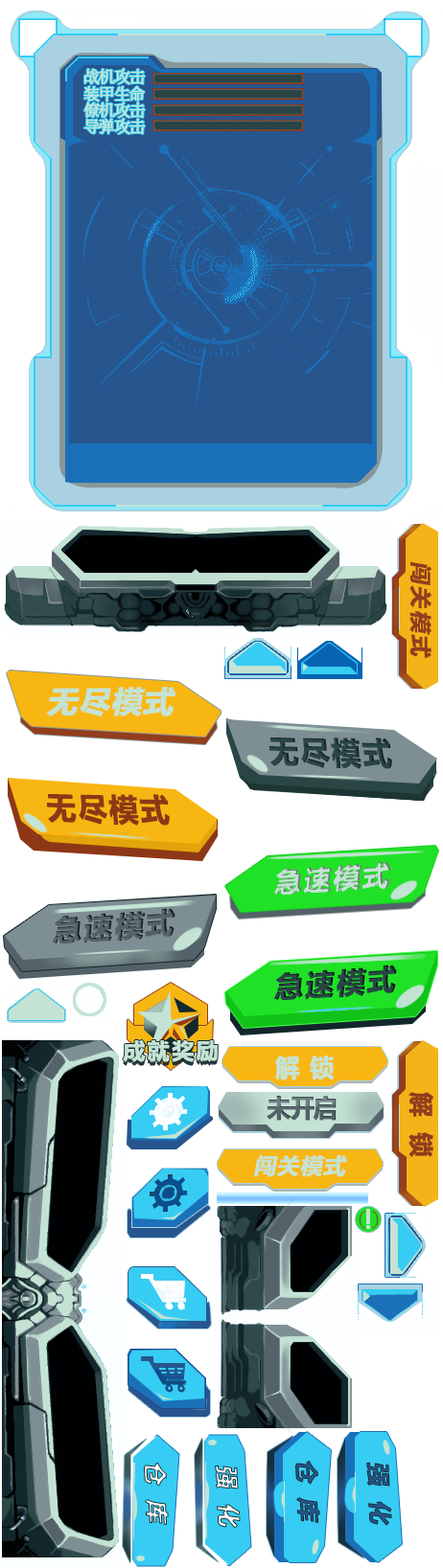
<style>
.page{position:relative;width:443px;height:1568px;background:#ffffff}
.page>*{position:absolute;margin:0}
.t1{font:16px "SourceHanSerifCN-ExtraLight";letter-spacing:-0.08em;color:#c4e3d4;font-weight:bold}
.t2{font:21.7px "MicrosoftYaHei-Bold";letter-spacing:0.1em;color:#923d1d;font-weight:bold;font-style:italic}
.t3{font:29.9px "MicrosoftYaHei-Bold";letter-spacing:0.04em;color:#c4e3d4;text-transform:uppercase;font-weight:bold;font-style:italic}
.t4{font:31.3px "MicrosoftYaHei-Bold";letter-spacing:0.06em;color:#294544;font-weight:bold;scale:0.92 1}
.t5{font:31.3px "MicrosoftYaHei-Bold";letter-spacing:0.06em;color:#8e3716;font-weight:bold;scale:0.92 1}
.t6{font:26.9px "MicrosoftYaHei-Bold";letter-spacing:0.06em;color:#c4e3d4;font-weight:bold;font-style:italic}
.t7{font:28.3px "MicrosoftYaHei-Bold";letter-spacing:0.06em;color:#536268;font-weight:bold;font-style:italic}
.t8{font:28.3px "MicrosoftYaHei-Bold";letter-spacing:0.06em;color:#294544;font-weight:bold;font-style:italic}
.t9{font:22.5px "MicrosoftYaHei-Bold";letter-spacing:0.06em;color:#c4e3d4;font-weight:bold}
.t10{font:24.4px "MicrosoftYaHei-Bold";letter-spacing:0.38em;color:#c4e3d4;font-weight:bold}
.t11{font:24.4px "MicrosoftYaHei-Bold";letter-spacing:-0.08em;color:#546369;font-weight:bold}
.t12{font:24.4px "MicrosoftYaHei-Bold";letter-spacing:0.6em;color:#923d1d;font-weight:bold}
.t13{font:21.7px "MicrosoftYaHei-Bold";letter-spacing:0.04em;color:#c4e3d4;text-transform:uppercase;font-weight:bold;font-style:italic}
.t14{font:23.3px "MicrosoftYaHei-Bold";letter-spacing:0.6em;text-transform:uppercase;font-weight:bold;font-style:italic}
.t15{font:23.5px "MicrosoftYaHei-Bold";letter-spacing:0.6em;text-transform:uppercase;font-weight:bold;font-style:italic}
</style>
<div class="page">
<p class="t1" style="left:84px;top:68px;width:62px;height:16px">战机攻击</p>
<p class="t1" style="left:83px;top:86px;width:62px;height:16px">装甲生命</p>
<p class="t1" style="left:83px;top:102px;width:63px;height:16px">僚机攻击</p>
<p class="t1" style="left:83px;top:118px;width:63px;height:16px">导弹攻击</p>
<p class="t2" style="left:409px;top:561px;width:22px;height:97px;rotate:90deg">闯关模式</p>
<p class="t3" style="left:47px;top:687px;width:129px;height:29px">无尽模式</p>
<p class="t4" style="left:268px;top:738px;width:124px;height:31px;rotate:1deg">无尽模式</p>
<p class="t5" style="left:46px;top:794px;width:124px;height:32px;rotate:1deg">无尽模式</p>
<p class="t6" style="left:274px;top:862px;width:117px;height:33px;rotate:-4deg">急速模式</p>
<p class="t7" style="left:52px;top:908px;width:123px;height:35px;rotate:-4deg">急速模式</p>
<p class="t8" style="left:273px;top:965px;width:124px;height:35px;rotate:-4deg">急速模式</p>
<p class="t9" style="left:123px;top:1040px;width:94px;height:22px">成就奖励</p>
<p class="t10" style="left:275px;top:1056px;width:59px;height:24px">解锁</p>
<p class="t11" style="left:266px;top:1096px;width:70px;height:25px">未开启</p>
<p class="t12" style="left:408px;top:1092px;width:25px;height:65px;rotate:90deg">解锁</p>
<p class="t13" style="left:254px;top:1155px;width:93px;height:22px">闯关模式</p>
<p class="t14" style="left:144px;top:1463px;width:25px;height:62px;rotate:87deg">仓库</p>
<p class="t15" style="left:215px;top:1465px;width:25px;height:64px;rotate:87deg">强化</p>
<p class="t14" style="left:295px;top:1461px;width:25px;height:62px;rotate:87deg">仓库</p>
<p class="t15" style="left:366px;top:1462px;width:26px;height:64px;rotate:87deg">强化</p>
</div>
